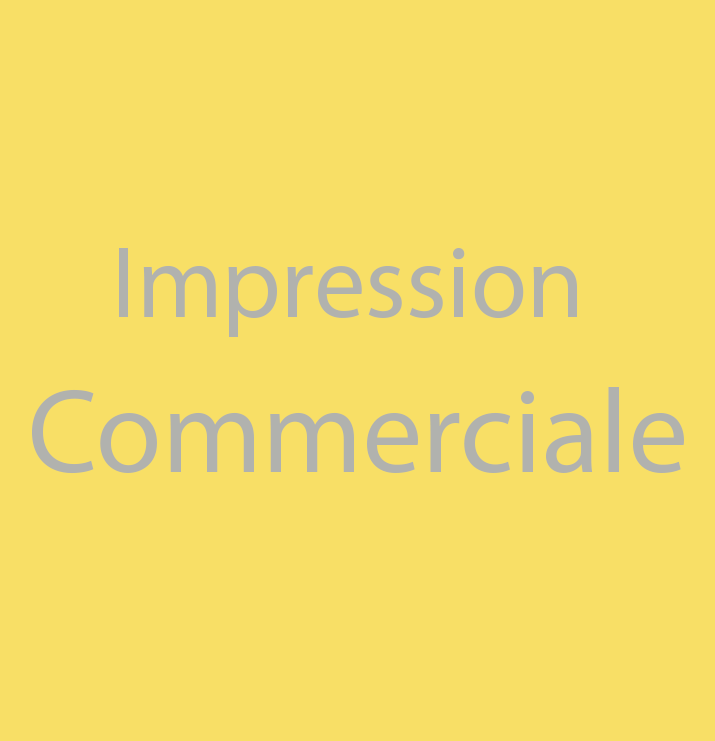
<style>
.page{position:relative;width:715px;height:741px;background:#f8df66}
.page>*{position:absolute;margin:0}
.t1{font:144px "MyriadArabic-Regular";color:#b1b2ae}
.t2{font:168px "MyriadArabic-Regular";color:#b1b2ae}
</style>
<div class="page">
<p class="t1" style="left:119px;top:248px;width:458px;height:89px">Impression</p>
<p class="t2" style="left:32px;top:387px;width:652px;height:87px">Commerciale</p>
</div>
